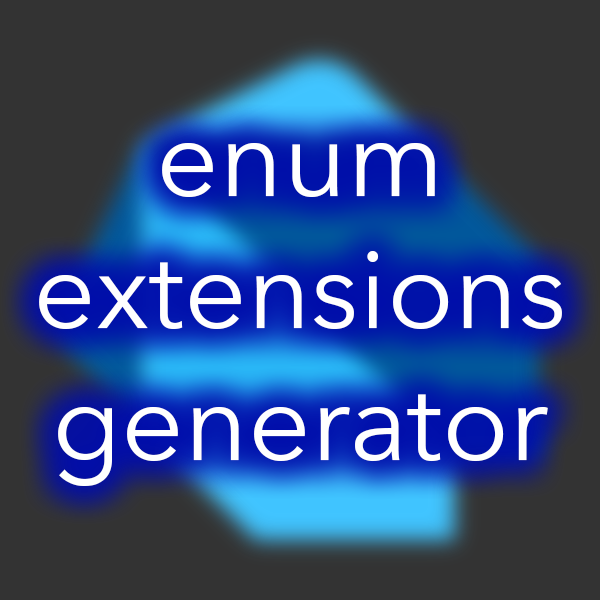
<style>
.page{position:relative;width:600px;height:600px;background:#333333}
.page>*{position:absolute;margin:0}
.t1{font:110px "AvenirNext-Regular";color:#ffffff}
</style>
<div class="page">
<p class="t1" style="left:39px;top:143px;width:523px;height:343px;text-align:center">enum<br>extensions<br>generator</p>
</div>
